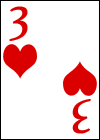
<style>
.page{position:relative;width:100px;height:140px;background:#ffffff}
.page>*{position:absolute;margin:0}
.t1{font:60px "HighTowerText-Reg";color:#da0000}
</style>
<div class="page">
<p class="t1" style="left:9px;top:6px;width:19px;height:35px">3</p>
<p class="t1" style="left:72px;top:99px;width:19px;height:35px;rotate:180deg">3</p>
</div>
